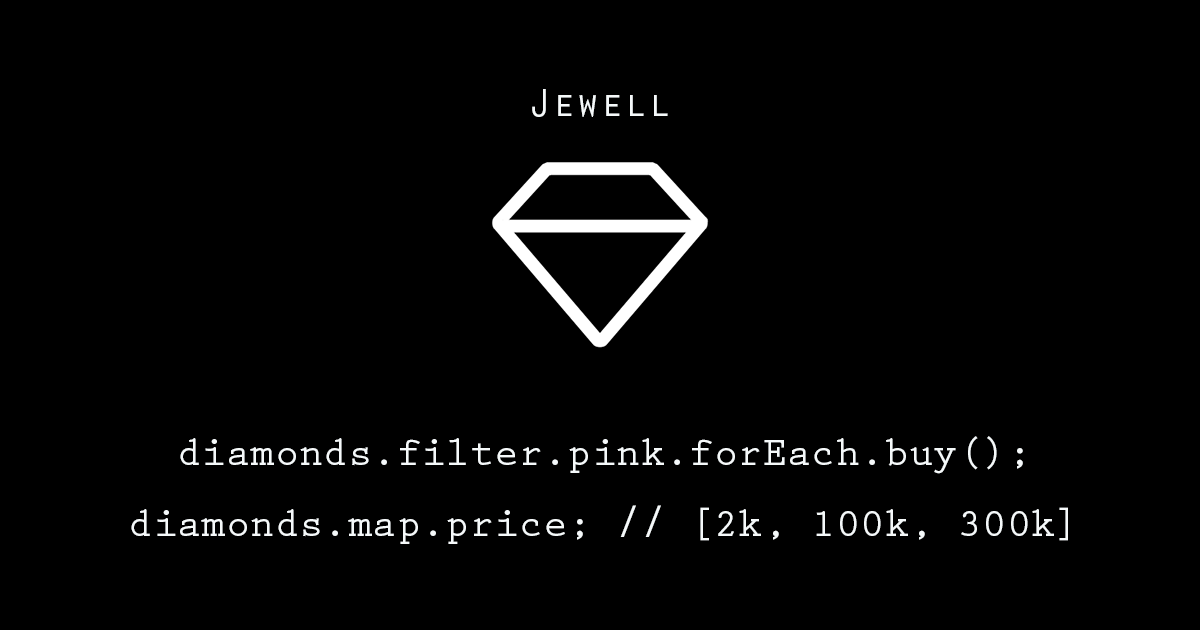
<style>
.page{position:relative;width:1200px;height:630px;background:#000000}
.page>*{position:absolute;margin:0}
.t1{font:39.7px "OratorStd";color:#f5f9fa}
.t2{font:40.7px/71.2px "PrestigeEliteStd-Bd";color:#f5f9fa}
</style>
<div class="page">
<p class="t1" style="left:532px;top:89px;width:136px;height:28px">Jewell</p>
<p class="t2" style="left:131px;top:436px;width:937px;height:108px;text-align:center">diamonds.filter.pink.forEach.buy();<br>diamonds.map.price; // [2k, 100k, 300k]</p>
</div>
